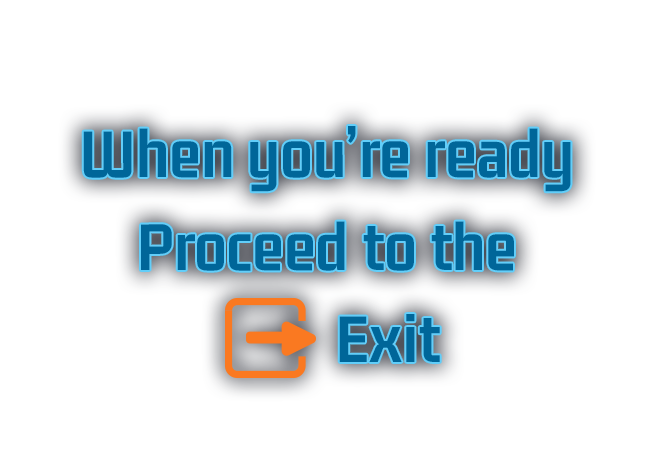
<style>
.page{position:relative;width:650px;height:450px;background:#ffffff}
.page>*{position:absolute;margin:0}
.t1{font:71.7px "GemunuLibre-Bold";color:#006699;font-weight:bold}
</style>
<div class="page">
<p class="t1" style="left:83px;top:126px;width:488px;height:66px">When you’re ready</p>
<p class="t1" style="left:141px;top:221px;width:373px;height:50px">Proceed to the</p>
<p class="t1" style="left:339px;top:314px;width:101px;height:48px">Exit</p>
</div>
